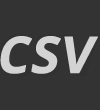
<style>
.page{position:relative;width:100px;height:110px;background:#333333}
.page>*{position:absolute;margin:0}
.t1{font:50.7px "OpenSans-Bold";color:#d3d3d3;font-weight:bold;font-style:italic}
</style>
<div class="page">
<p class="t1" style="left:0px;top:36px;width:98px;height:38px">CSV</p>
</div>
